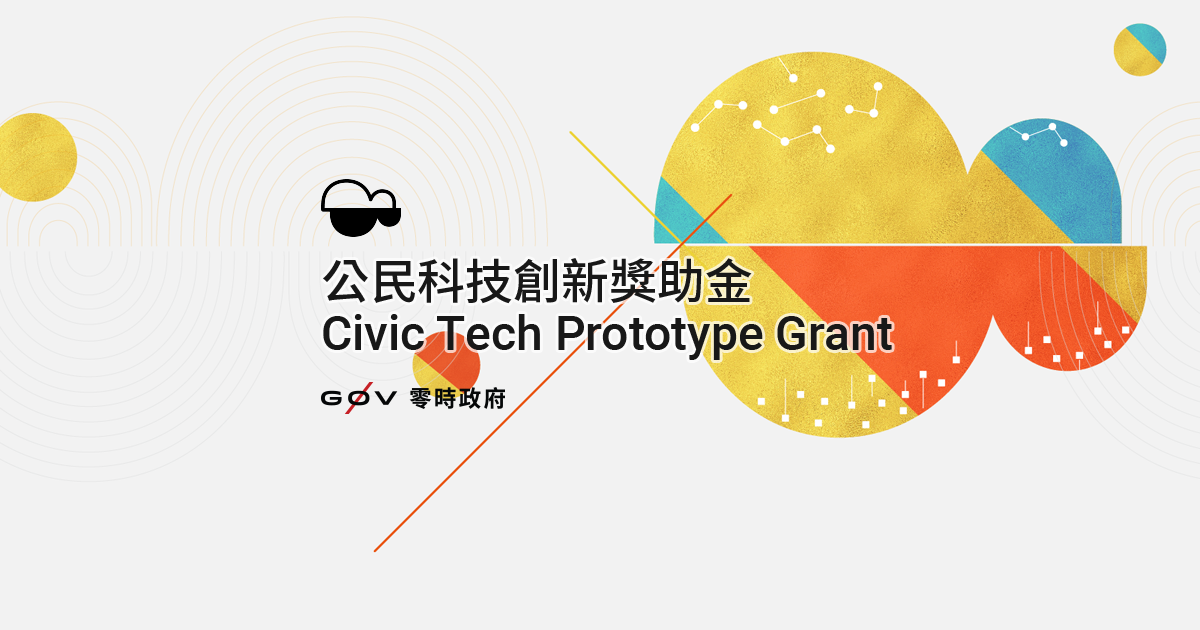
<style>
.page{position:relative;width:1200px;height:630px;background:#f2f2f2}
.page>*{position:absolute;margin:0}
.t1{font:48px "SourceHanSansTW-Medium";color:#181818}
.t2{font:48px "Roboto-Medium";color:#181818}
</style>
<div class="page">
<p class="t1" style="left:323px;top:258px;width:429px;height:46px">公民科技創新獎助金</p>
<p class="t2" style="left:323px;top:314px;width:569px;height:46px">Civic Tech Prototype Grant</p>
</div>
